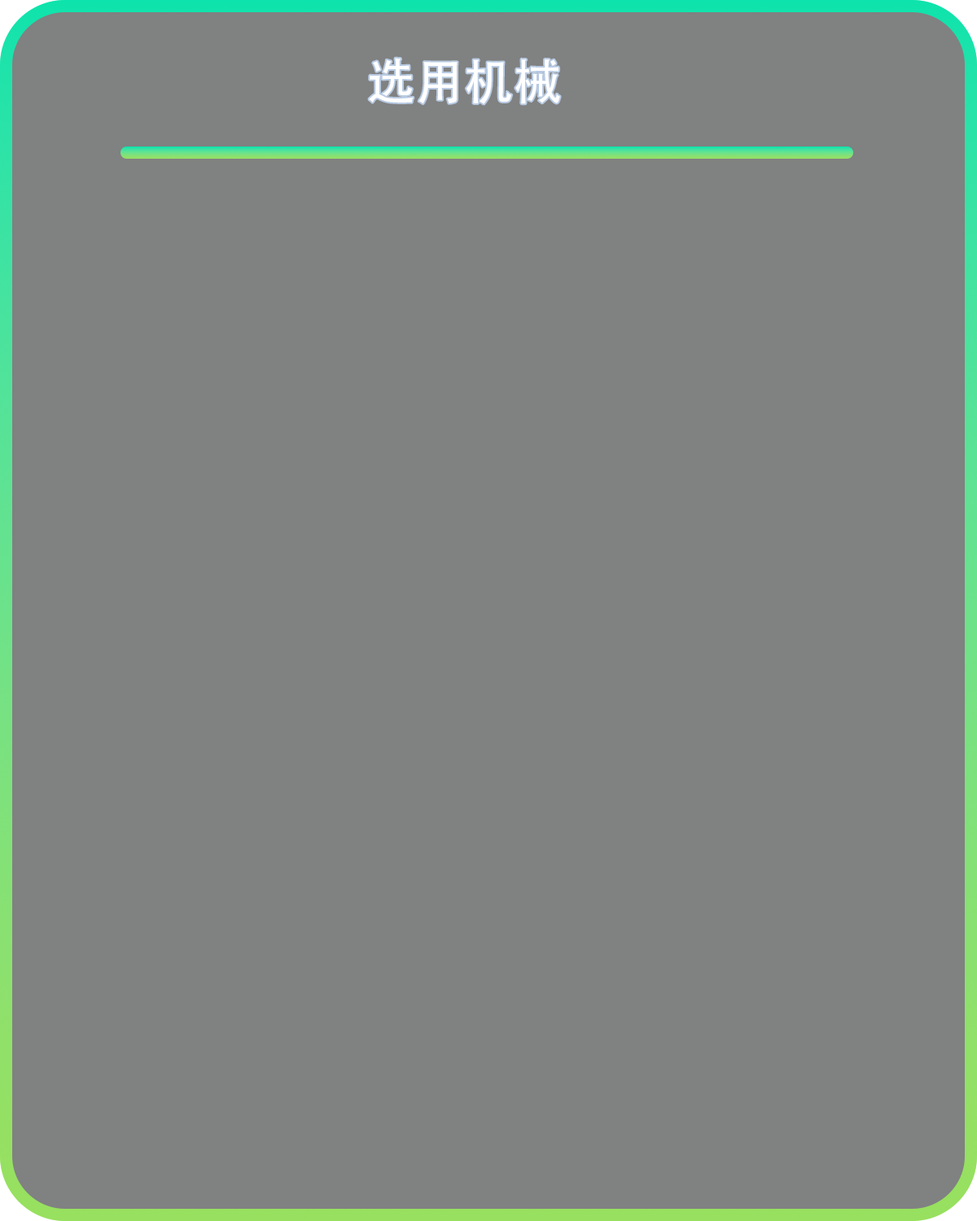
<style>
.page{position:relative;width:977px;height:1221px;background:#808181}
.page>*{position:absolute;margin:0}
.t1{font:48.8px "AdobeHeitiStd-Regular";color:#ffffff}
</style>
<div class="page">
<p class="t1" style="left:369px;top:58px;width:191px;height:46px">选用机械</p>
</div>
